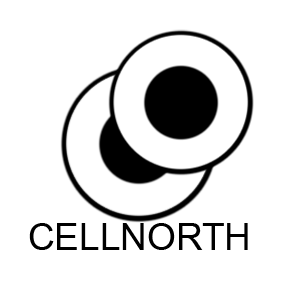
<style>
.page{position:relative;width:281px;height:281px;background:#ffffff}
.page>*{position:absolute;margin:0}
.t1{font:37px "ArialMT";color:#000000}
</style>
<div class="page">
<p class="t1" style="left:29px;top:223px;width:219px;height:27px">CELLNORTH</p>
</div>
